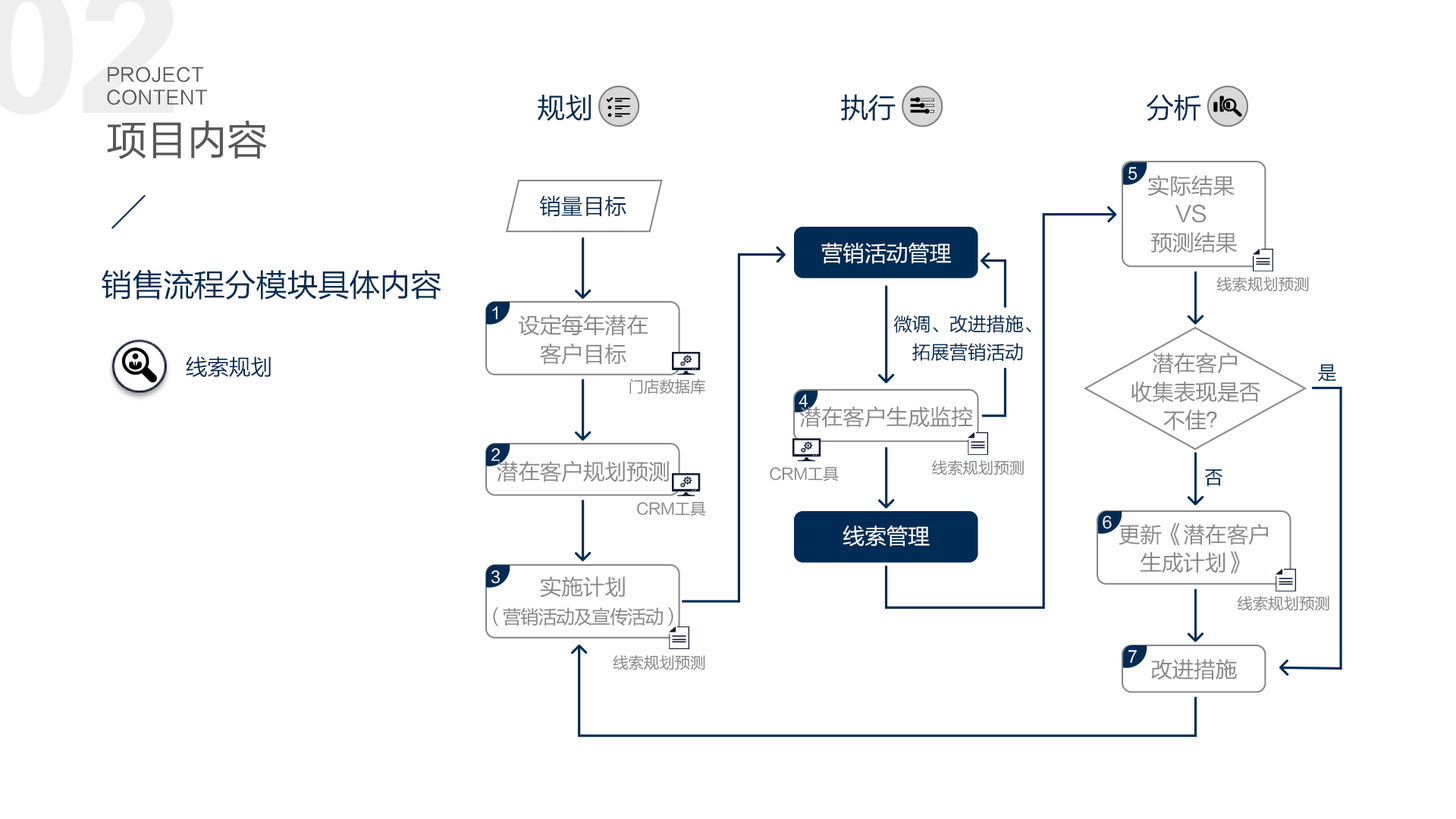
<style>
.page{position:relative;width:1456px;height:819px;background:#ffffff}
.page>*{position:absolute;margin:0}
.t1{font:18.8px "FZLTHJW--GB1-0";letter-spacing:0.02em;color:#595757}
.t2{font:28.4px "FZLTHJW--GB1-0";letter-spacing:-0.02em;color:#002c54}
.t3{font:41.1px "FZLTHJW--GB1-0";letter-spacing:-0.02em;color:#595757}
.t4{font:15.8px "FZLTHJW--GB1-0";letter-spacing:-0.02em;color:#ffffff}
.t5{font:22.1px/28.4px "FZLTHJW--GB1-0";letter-spacing:-0.02em;color:#888888}
.t6{font:22.1px "FZLTHJW--GB1-0";letter-spacing:-0.02em;color:#002c54}
.t7{font:22.1px "FZLTHJW--GB1-0";letter-spacing:-0.02em;color:#ffffff}
.t8{font:31.6px "FZLTHJW--GB1-0";letter-spacing:-0.02em;color:#002c54}
.t9{font:15.8px "FZLTHJW--GB1-0";letter-spacing:-0.02em;color:#888888}
.t10{font:19px/28.4px "FZLTHJW--GB1-0";letter-spacing:-0.02em;color:#002c54}
.t11{font:19px "FZLTHJW--GB1-0";letter-spacing:-0.02em;color:#002c54}
.t12{font:22.1px "FZLTHJW--GB1-0";letter-spacing:-0.02em;color:#888888}
.t13{font:19px/28.4px "FZLTHJW--GB1-0";letter-spacing:-0.06em;color:#888888}
</style>
<div class="page">
<p class="t1" style="left:107px;top:67px;width:101px;height:38px">PROJECT <br>CONTENT</p>
<p class="t2" style="left:538px;top:94px;width:53px;height:27px">规划</p>
<p class="t2" style="left:841px;top:94px;width:55px;height:27px">执行</p>
<p class="t2" style="left:1147px;top:94px;width:54px;height:27px">分析</p>
<p class="t3" style="left:107px;top:120px;width:160px;height:39px">项目内容</p>
<p class="t4" style="left:1128px;top:167px;width:9px;height:13px">5</p>
<p class="t5" style="left:1148px;top:175px;width:89px;height:78px;text-align:center">实际结果 <br>VS <br>预测结果</p>
<p class="t6" style="left:540px;top:196px;width:86px;height:21px">销量目标</p>
<p class="t7" style="left:821px;top:243px;width:130px;height:21px">营销活动管理</p>
<p class="t8" style="left:102px;top:269px;width:339px;height:31px">销售流程分模块具体内容</p>
<p class="t9" style="left:1216px;top:276px;width:93px;height:16px">线索规划预测</p>
<p class="t4" style="left:492px;top:306px;width:5px;height:13px">1</p>
<p class="t5" style="left:519px;top:315px;width:129px;height:50px;text-align:center">设定每年潜在<br>客户目标</p>
<p class="t10" style="left:893px;top:315px;width:138px;height:47px;text-align:center">微调、改进措施、<br>拓展营销活动</p>
<p class="t5" style="left:1131px;top:352px;width:129px;height:79px;text-align:center">潜在客户<br>收集表现是否<br>不佳？</p>
<p class="t6" style="left:186px;top:356px;width:85px;height:22px">线索规划</p>
<p class="t11" style="left:1318px;top:364px;width:18px;height:17px">是</p>
<p class="t9" style="left:629px;top:379px;width:77px;height:15px">门店数据库</p>
<p class="t4" style="left:799px;top:394px;width:9px;height:13px">4</p>
<p class="t12" style="left:800px;top:406px;width:173px;height:22px">潜在客户生成监控</p>
<p class="t4" style="left:491px;top:448px;width:9px;height:13px">2</p>
<p class="t12" style="left:497px;top:460px;width:172px;height:22px">潜在客户规划预测</p>
<p class="t9" style="left:932px;top:460px;width:92px;height:15px">线索规划预测</p>
<p class="t9" style="left:770px;top:466px;width:69px;height:16px">CRM工具</p>
<p class="t11" style="left:1205px;top:469px;width:17px;height:17px">否</p>
<p class="t9" style="left:637px;top:501px;width:69px;height:15px">CRM工具</p>
<p class="t4" style="left:1103px;top:516px;width:9px;height:13px">6</p>
<p class="t7" style="left:842px;top:526px;width:88px;height:21px">线索管理</p>
<p class="t5" style="left:1119px;top:523px;width:149px;height:50px;text-align:center">更新《潜在客户<br>生成计划》</p>
<p class="t4" style="left:491px;top:570px;width:9px;height:14px">3</p>
<p class="t13" style="left:493px;top:576px;width:180px;height:50px;text-align:center"><span class="t5">实施计划<br></span>（营销活动及宣传活动）</p>
<p class="t9" style="left:1237px;top:595px;width:92px;height:16px">线索规划预测</p>
<p class="t4" style="left:1128px;top:650px;width:9px;height:13px">7</p>
<p class="t9" style="left:613px;top:654px;width:92px;height:16px">线索规划预测</p>
<p class="t12" style="left:1151px;top:659px;width:86px;height:21px">改进措施</p>
</div>
